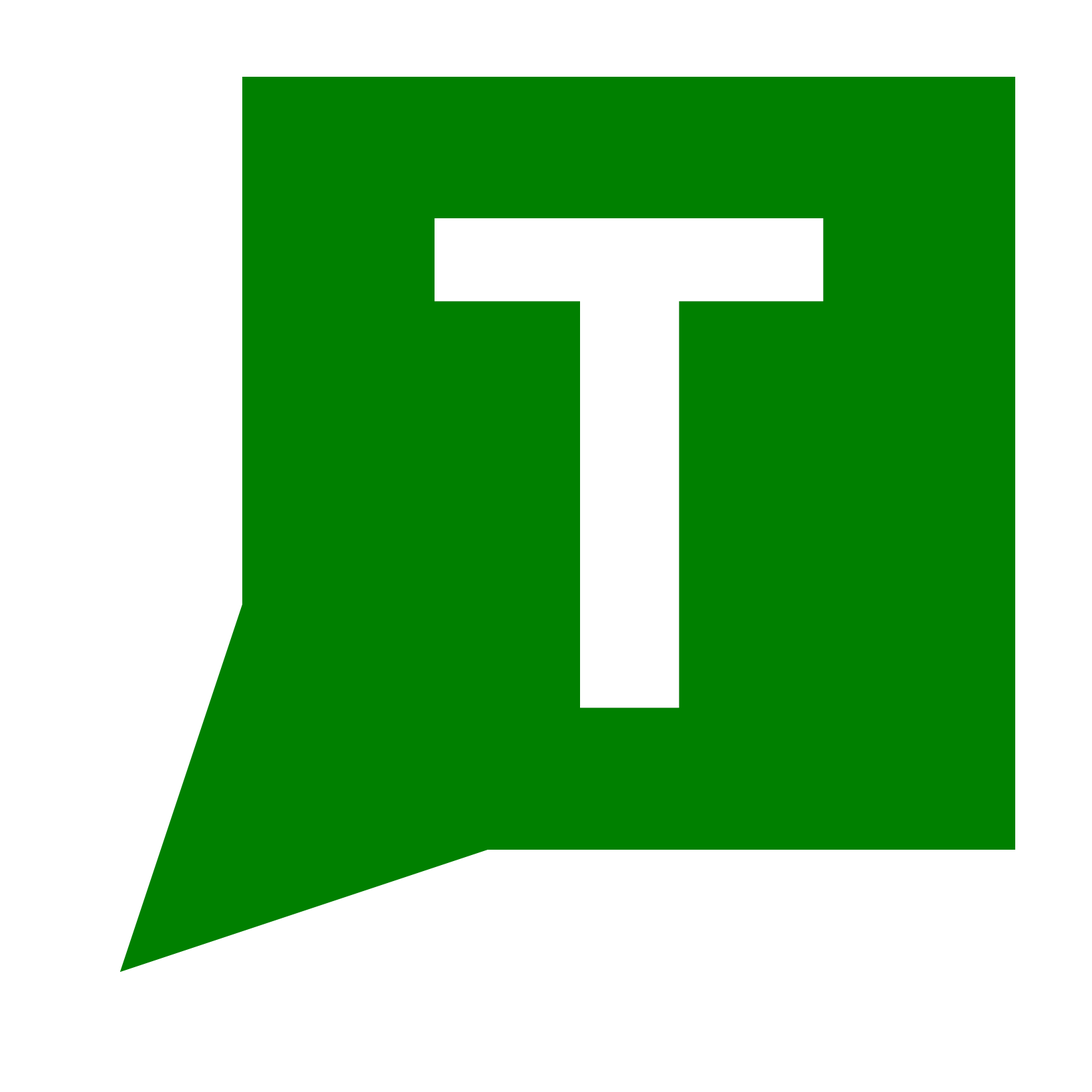
<style>
.page{position:relative;width:1092px;height:1092px;background:#ffffff}
.page>*{position:absolute;margin:0}
.t1{font:683.5px "Arial-BoldMT";color:#ffffff}
</style>
<div class="page">
<p class="t1" style="left:435px;top:218px;width:389px;height:490px">T</p>
</div>
